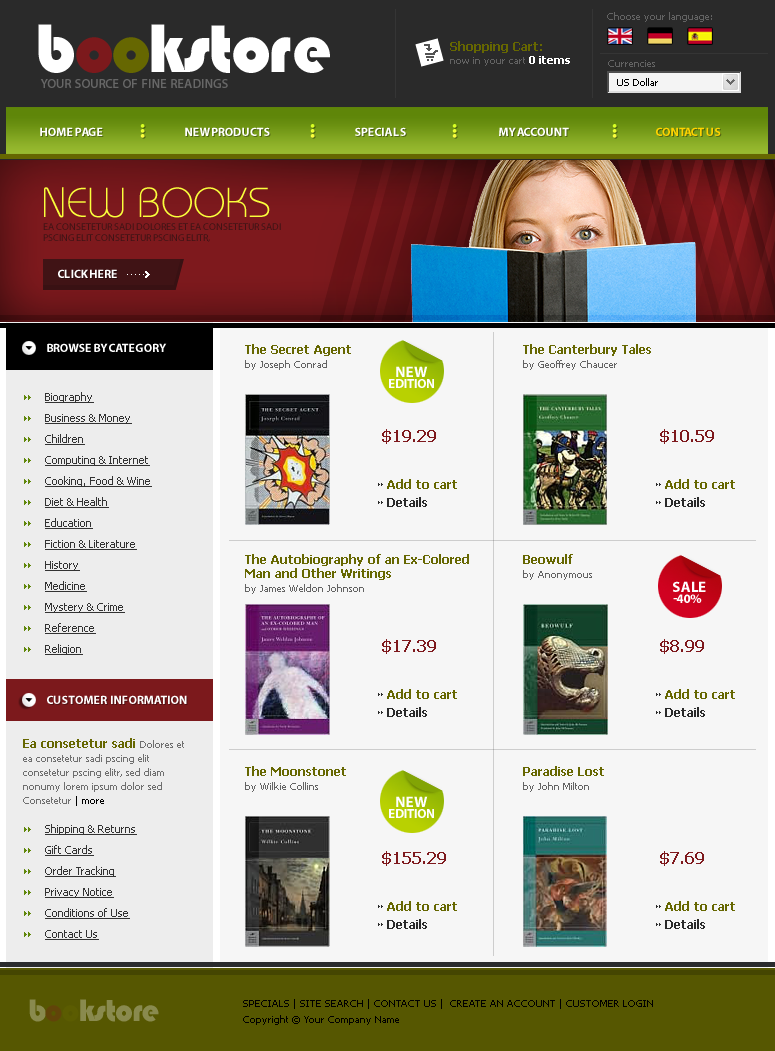
<style>
.page{position:relative;width:775px;height:1051px;background:#f6f6f6}
.page>*{position:absolute;margin:0}
.t1{font:10px "Tahoma";color:#636363}
.t2{font:66.7px "BlippoBT-Black";letter-spacing:-0.01em;color:#ffffff}
.t3{font:66.7px "BlippoBT-Black";letter-spacing:-0.01em;color:#7c191c}
.t4{font:66.7px "BlippoBT-Black";letter-spacing:-0.01em;color:#666701}
.t5{font:12px "Tahoma-Bold";color:#666701}
.t6{font:11.1px "Tahoma-Bold";color:#ffffff}
.t7{font:10px "Tahoma";color:#000000}
.t8{font:13px "MyriadPro-Semibold";color:#676767}
.t9{font:12px "MyriadPro-Bold";letter-spacing:-0.01em;color:#ffffff}
.t10{font:12px "MyriadPro-Bold";letter-spacing:-0.01em;color:#ffd200}
.t11{font:41.7px "BauhausStd-Light";letter-spacing:-0.01em;color:#faff3c}
.t12{font:10px/11.2px "MyriadPro-Regular";color:#401315;text-transform:uppercase}
.t13{font:12px/14px "Tahoma-Bold";color:#666701}
.t14{font:10px/14px "Tahoma";color:#636363}
.t15{font:13px/11px "MyriadPro-Bold";color:#ffffff;text-transform:uppercase}
.t16{font:15px/11px "MyriadPro-Bold";color:#ffffff;text-transform:uppercase}
.t17{font:11px/21px "Tahoma";color:#333333;text-decoration:underline}
.t18{font:16px "Tahoma-Bold";color:#7e191d}
.t19{font:12px "Tahoma-Bold";color:#2a2a2a}
.t20{font:10px/14px "Tahoma";color:#6f6f6f}
.t21{font:10px/14px "Tahoma";color:#000000}
.t22{font:30px "BlippoBT-Black";letter-spacing:-0.01em;color:#898a4e}
.t23{font:10px "Tahoma";color:#000000;text-transform:uppercase}
</style>
<div class="page">
<p class="t1" style="left:607px;top:12px;width:105px;height:10px">Choose your language:</p>
<p class="t2" style="left:38px;top:24px;width:292px;height:49px">b<span class="t3">o</span><span class="t4">o</span>kstore</p>
<p class="t1" style="left:450px;top:41px;width:120px;height:25px"><span class="t5">Shopping Cart:<br></span>now in your cart <span class="t6">0 items</span></p>
<p class="t1" style="left:608px;top:60px;width:47px;height:7px">Currencies</p>
<p class="t7" style="left:617px;top:78px;width:41px;height:8px">US Dollar</p>
<p class="t8" style="left:40px;top:79px;width:188px;height:9px">YOUR SOURCE OF FINE READINGS</p>
<p class="t9" style="left:40px;top:127px;width:63px;height:9px">HOME PAGE</p>
<p class="t9" style="left:185px;top:127px;width:85px;height:9px">NEW PRODUCTS</p>
<p class="t9" style="left:355px;top:127px;width:51px;height:9px">SPECIALS</p>
<p class="t9" style="left:499px;top:127px;width:70px;height:9px">MY ACCOUNT</p>
<p class="t10" style="left:656px;top:127px;width:65px;height:9px">CONTACT US</p>
<p class="t11" style="left:44px;top:187px;width:226px;height:31px">NEW BOOKS</p>
<p class="t12" style="left:43px;top:223px;width:238px;height:19px">Ea consetetur sadi Dolores et ea consetetur sadi pscing elit consetetur pscing elitr,</p>
<p class="t9" style="left:58px;top:269px;width:59px;height:9px">CLICK HERE</p>
<p class="t9" style="left:47px;top:343px;width:120px;height:9px">BROWSE BY CATEGORY</p>
<p class="t13" style="left:245px;top:344px;width:106px;height:26px">The Secret Agent <br><span class="t14">by Joseph Conrad</span></p>
<p class="t13" style="left:523px;top:344px;width:128px;height:26px">The Canterbury Tales<br><span class="t14">by Geoffrey Chaucer</span></p>
<p class="t15" style="left:389px;top:366px;width:45px;height:22px;text-align:center"><span class="t16">NEW<br></span>edition</p>
<p class="t17" style="left:45px;top:392px;width:107px;height:263px">Biography<br>Business &amp; Money<br>Children<br>Computing &amp; Internet<br>Cooking, Food &amp; Wine<br>Diet &amp; Health<br>Education<br>Fiction &amp; Literature<br>History<br>Medicine<br>Mystery &amp; Crime<br>Reference<br>Religion</p>
<p class="t18" style="left:382px;top:429px;width:54px;height:15px">$19.29</p>
<p class="t18" style="left:660px;top:429px;width:54px;height:15px">$10.59</p>
<p class="t5" style="left:387px;top:479px;width:70px;height:10px">Add to cart</p>
<p class="t5" style="left:665px;top:479px;width:70px;height:10px">Add to cart</p>
<p class="t19" style="left:387px;top:497px;width:40px;height:10px">Details</p>
<p class="t19" style="left:665px;top:497px;width:40px;height:10px">Details</p>
<p class="t13" style="left:245px;top:554px;width:224px;height:40px">The Autobiography of an Ex-Colored Man and Other Writings <br><span class="t14">by James Weldon Johnson</span></p>
<p class="t14" style="left:523px;top:554px;width:69px;height:26px"><span class="t13">Beowulf <br></span>by Anonymous</p>
<p class="t16" style="left:673px;top:581px;width:33px;height:22px;text-align:center">sale<br><span class="t15">-40%</span></p>
<p class="t18" style="left:382px;top:639px;width:54px;height:15px">$17.39</p>
<p class="t18" style="left:660px;top:639px;width:44px;height:15px">$8.99</p>
<p class="t5" style="left:387px;top:689px;width:70px;height:10px">Add to cart</p>
<p class="t5" style="left:665px;top:689px;width:70px;height:10px">Add to cart</p>
<p class="t9" style="left:47px;top:695px;width:140px;height:9px">CUSTOMER  INFORMATION</p>
<p class="t19" style="left:387px;top:707px;width:40px;height:10px">Details</p>
<p class="t19" style="left:665px;top:707px;width:40px;height:10px">Details</p>
<p class="t20" style="left:23px;top:738px;width:161px;height:68px"><span class="t13">Ea consetetur sadi </span>Dolores et ea consetetur sadi pscing elit consetetur pscing elitr, sed diam nonumy lorem ipsum dolor sed Consetetur <span class="t21">| more</span></p>
<p class="t14" style="left:245px;top:766px;width:101px;height:26px"><span class="t13">The Moonstonet<br></span>by Wilkie Collins</p>
<p class="t14" style="left:523px;top:766px;width:81px;height:26px"><span class="t13">Paradise Lost <br></span>by John Milton</p>
<p class="t15" style="left:389px;top:796px;width:45px;height:22px;text-align:center"><span class="t16">NEW<br></span>edition</p>
<p class="t17" style="left:45px;top:824px;width:92px;height:116px">Shipping &amp; Returns<br>Gift Cards<br>Order Tracking<br>Privacy Notice<br>Conditions of Use<br>Contact Us</p>
<p class="t18" style="left:382px;top:851px;width:64px;height:15px">$155.29</p>
<p class="t18" style="left:660px;top:851px;width:44px;height:15px">$7.69</p>
<p class="t5" style="left:387px;top:901px;width:70px;height:10px">Add to cart</p>
<p class="t5" style="left:665px;top:901px;width:70px;height:10px">Add to cart</p>
<p class="t19" style="left:387px;top:919px;width:40px;height:10px">Details</p>
<p class="t19" style="left:665px;top:919px;width:40px;height:10px">Details</p>
<p class="t22" style="left:29px;top:999px;width:130px;height:23px">bookstore</p>
<p class="t23" style="left:243px;top:999px;width:410px;height:10px">Specials | Site Search | Contact Us |  Create an Account | Customer Login</p>
<p class="t7" style="left:243px;top:1015px;width:156px;height:10px">Copyright © Your Company Name</p>
</div>
